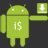
<style>
.page{position:relative;width:48px;height:48px;background:#333333}
.page>*{position:absolute;margin:0}
.t1{font:10px "TrebuchetMS";color:#ffffff}
</style>
<div class="page">
<p class="t1" style="left:14px;top:21px;width:8px;height:10px">i$</p>
</div>
